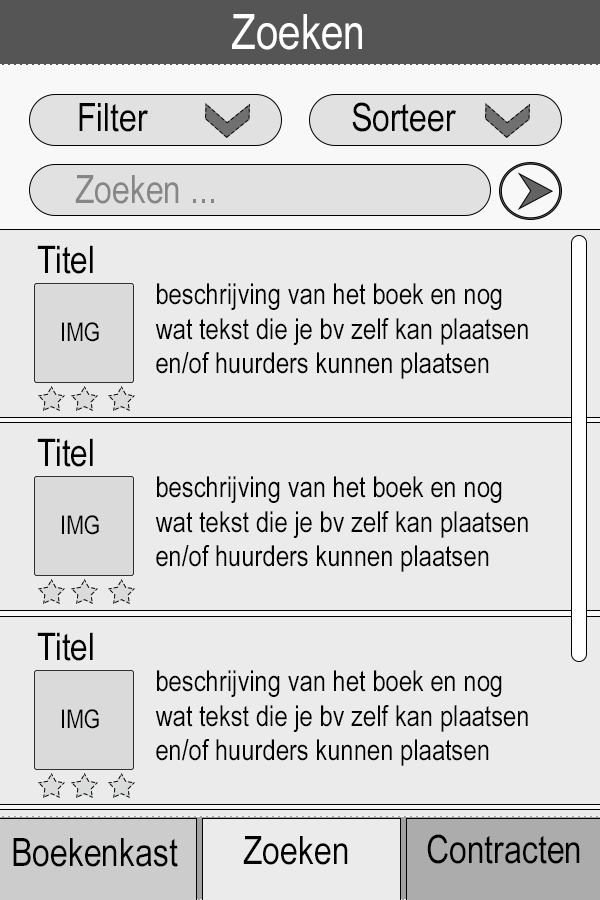
<style>
.page{position:relative;width:600px;height:900px;background:#ebebeb}
.page>*{position:absolute;margin:0}
.t1{font:49px "ArialNarrow";color:#ffffff}
.t2{font:39px "ArialNarrow";color:#000000}
.t3{font:39px "ArialNarrow";color:#868686}
.t4{font:38px "ArialNarrow";color:#000000}
.t5{font:29px "ArialNarrow";color:#000000}
.t6{font:26px "ArialNarrow";color:#000000}
</style>
<div class="page">
<p class="t1" style="left:232px;top:14px;width:130px;height:36px">Zoeken</p>
<p class="t2" style="left:352px;top:102px;width:104px;height:30px">Sorteer</p>
<p class="t2" style="left:79px;top:103px;width:69px;height:29px">Filter</p>
<p class="t3" style="left:75px;top:175px;width:139px;height:29px">Zoeken ...</p>
<p class="t4" style="left:37px;top:245px;width:56px;height:29px">Titel</p>
<p class="t5" style="left:155px;top:283px;width:373px;height:96px">beschrijving van het boek en nog wat tekst die je bv zelf kan plaatsen en/of huurders kunnen plaatsen</p>
<p class="t6" style="left:62px;top:322px;width:37px;height:20px">IMG</p>
<p class="t4" style="left:37px;top:438px;width:56px;height:29px">Titel</p>
<p class="t5" style="left:155px;top:476px;width:373px;height:96px">beschrijving van het boek en nog wat tekst die je bv zelf kan plaatsen en/of huurders kunnen plaatsen</p>
<p class="t6" style="left:62px;top:515px;width:37px;height:20px">IMG</p>
<p class="t4" style="left:37px;top:632px;width:56px;height:29px">Titel</p>
<p class="t5" style="left:155px;top:670px;width:373px;height:96px">beschrijving van het boek en nog wat tekst die je bv zelf kan plaatsen en/of huurders kunnen plaatsen</p>
<p class="t6" style="left:62px;top:709px;width:37px;height:20px">IMG</p>
<p class="t2" style="left:13px;top:838px;width:165px;height:29px">Boekenkast</p>
<p class="t2" style="left:243px;top:836px;width:105px;height:29px">Zoeken</p>
<p class="t2" style="left:427px;top:834px;width:153px;height:30px">Contracten</p>
</div>
